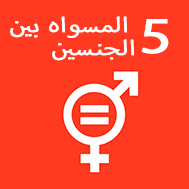
<style>
.page{position:relative;width:189px;height:189px;background:#ff3a20}
.page>*{position:absolute;margin:0}
.t1{font:29.8px/22.8px "MyriadArabic-Regular";color:#ffffff;font-weight:bold;scale:1.2 1}
.t2{font:71.9px "MyriadArabic-Regular";color:#ffffff;font-weight:bold;scale:1.2 1}
</style>
<div class="page">
<p class="t1" style="left:10px;top:16px;width:124px;height:45px;text-align:right">المسواه بين <br>الجنسين</p>
<p class="t2" style="left:141px;top:19px;width:28px;height:35px">5</p>
</div>
